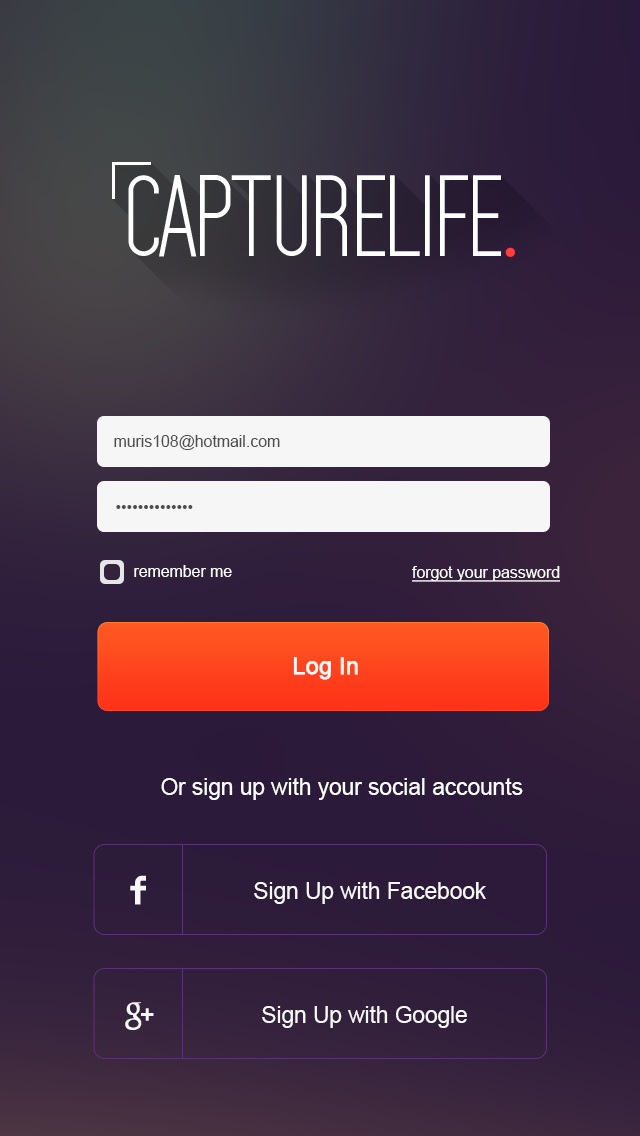
<style>
.page{position:relative;width:640px;height:1136px}
.page>*{position:absolute;margin:0}
.t1{font:81.5px "Mojave";color:#ffffff}
.t2{font:81.5px "MinionPro-Regular";color:#ff3e3e}
.t3{font:15.8px "ArialMT";color:#4e4e4e}
.t4{font:15.8px "ArialMT";color:#ffffff}
.t5{font:15.8px "ArialMT";color:#ffffff;text-decoration:underline}
.t6{font:22.6px "ArialMT";color:#f8f8f8;font-weight:bold}
.t7{font:22.6px "ArialMT";color:#ffffff}
.t8{font:22.6px "ArialMT";color:#f8f8f8}
</style>
<div class="page">
<p class="t1" style="left:128px;top:175px;width:387px;height:82px">CAPTUReLIFE<span class="t2">.</span></p>
<p class="t3" style="left:114px;top:435px;width:166px;height:15px">muris108@hotmail.com</p>
<p class="t3" style="left:116px;top:505px;width:77px;height:4px">••••••••••••••</p>
<p class="t4" style="left:134px;top:565px;width:98px;height:12px">remember me</p>
<p class="t5" style="left:412px;top:566px;width:148px;height:16px">forgot your password</p>
<p class="t6" style="left:293px;top:657px;width:65px;height:23px">Log In</p>
<p class="t7" style="left:161px;top:778px;width:362px;height:22px">Or sign up with your social accounts</p>
<p class="t8" style="left:254px;top:882px;width:232px;height:22px">Sign Up with Facebook</p>
<p class="t8" style="left:262px;top:1006px;width:205px;height:22px">Sign Up with Google</p>
</div>
